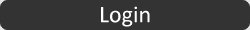
<style>
.page{position:relative;width:250px;height:30px;background:#333333}
.page>*{position:absolute;margin:0}
.t1{font:24px "Calibri";color:#ffffff}
</style>
<div class="page">
<p class="t1" style="left:101px;top:6px;width:49px;height:21px">Login</p>
</div>
